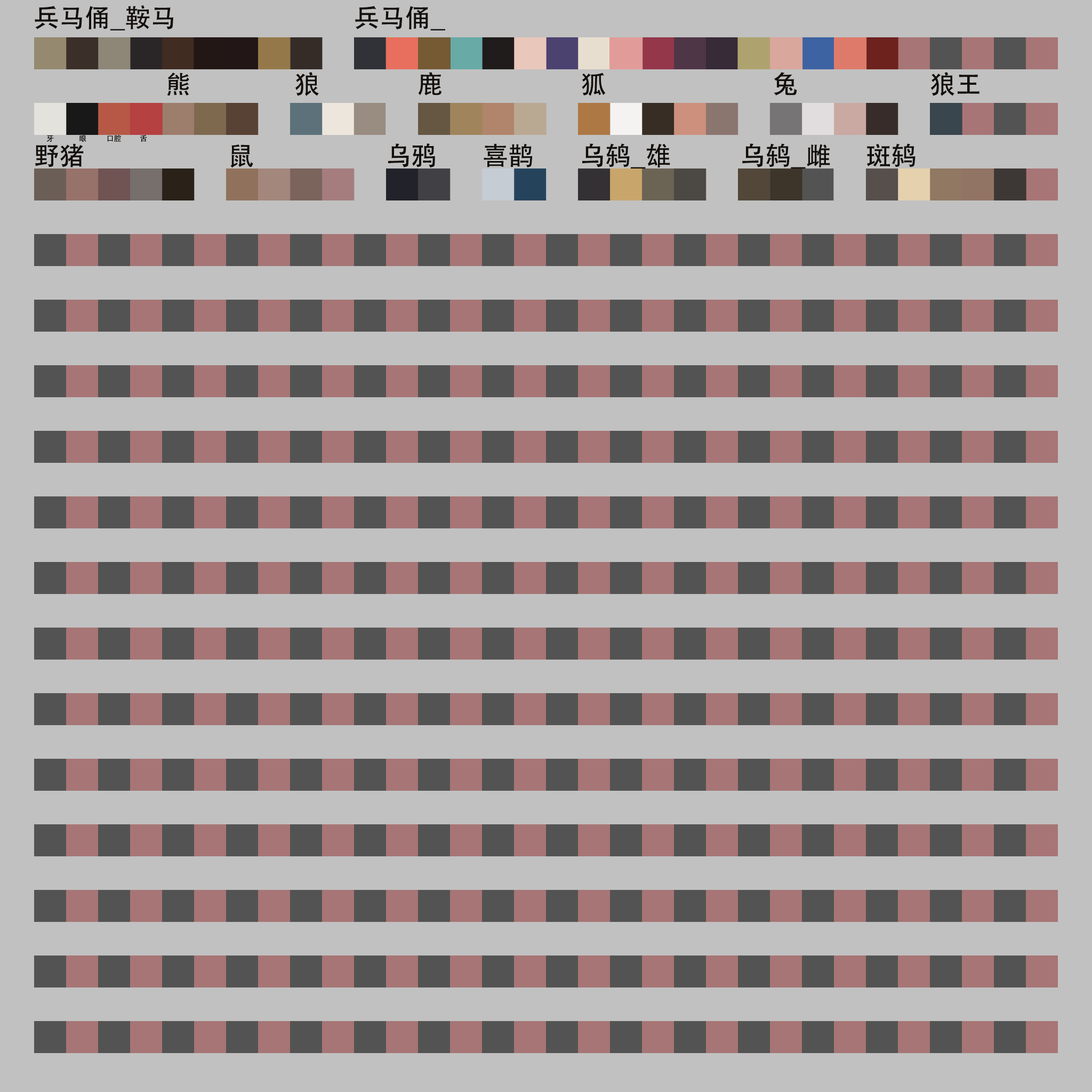
<style>
.page{position:relative;width:1092px;height:1092px;background:#c1c1c1}
.page>*{position:absolute;margin:0}
.t1{font:25.6px "AdobeHeitiStd-Regular";color:#130e0a}
.t2{font:7.5px "AdobeHeitiStd-Regular";color:#130e0a}
</style>
<div class="page">
<p class="t1" style="left:35px;top:5px;width:410px;height:25px">兵马俑_鞍马                               兵马俑_</p>
<p class="t1" style="left:167px;top:72px;width:812px;height:24px">熊                  狼                 鹿                        狐                             兔                       狼王</p>
<p class="t2" style="left:46px;top:135px;width:101px;height:7px">牙               眼            口腔           舌</p>
<p class="t1" style="left:35px;top:143px;width:880px;height:25px">野猪                         鼠                       乌鸦        喜鹊        乌鸫_雄            乌鸫_雌      斑鸫</p>
</div>
